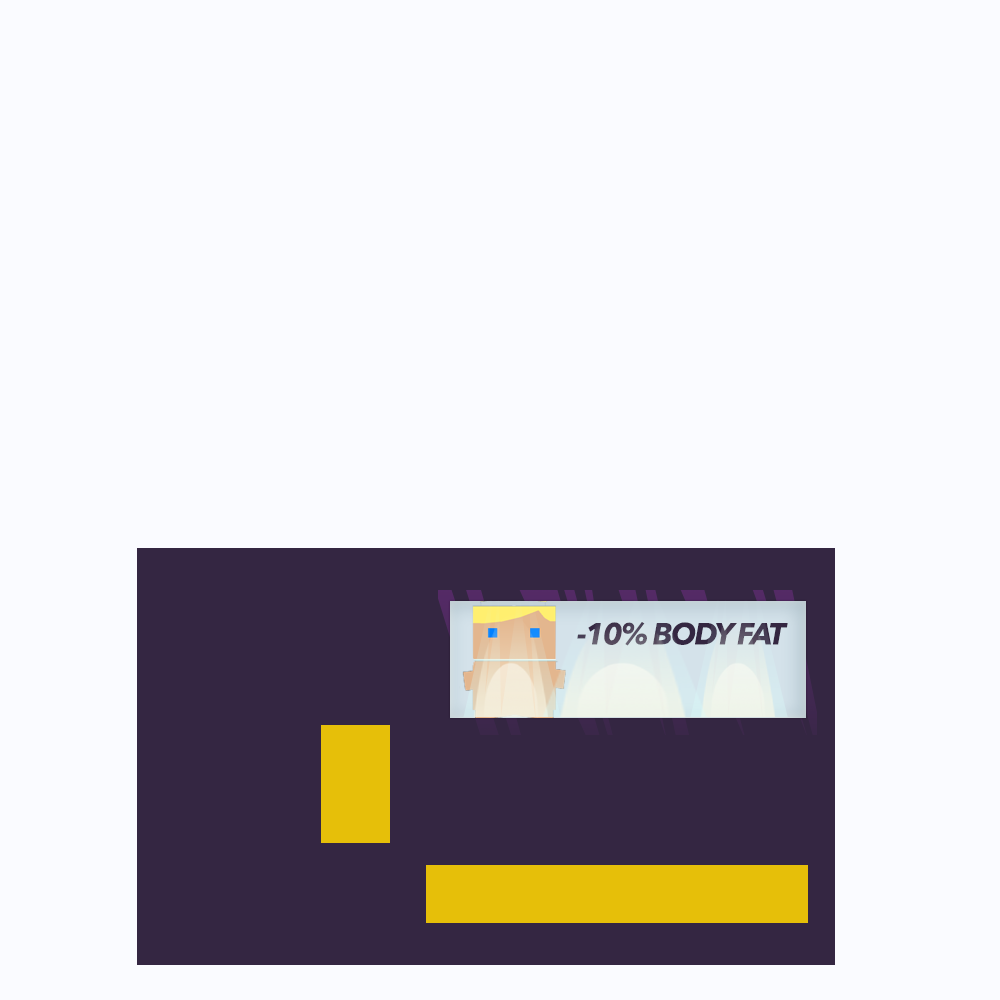
<style>
.page{position:relative;width:1000px;height:1000px;background:#fafbff}
.page>*{position:absolute;margin:0}
.t1{font:30px "AvenirNext-BoldItalic";letter-spacing:-0.05em;color:#443a52}
</style>
<div class="page">
<p class="t1" style="left:577px;top:622px;width:211px;height:24px">-10% BODY FAT</p>
</div>
